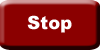
<style>
.page{position:relative;width:100px;height:50px;background:#8b0000}
.page>*{position:absolute;margin:0}
.t1{font:18px "Arial-Black";color:#fffeff}
</style>
<div class="page">
<p class="t1" style="left:27px;top:15px;width:45px;height:18px">Stop</p>
</div>
